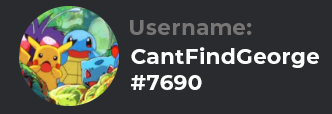
<style>
.page{position:relative;width:332px;height:114px;background:#292b2f}
.page>*{position:absolute;margin:0}
.t1{font:21.3px "Montserrat-Bold";letter-spacing:0.02em;color:#787575}
.t2{font:21.3px "Montserrat-Bold";letter-spacing:0.02em;color:#ffffff}
</style>
<div class="page">
<p class="t1" style="left:130px;top:20px;width:122px;height:15px">Username:</p>
<p class="t2" style="left:131px;top:47px;width:188px;height:43px">CantFindGeorge<br>#7690</p>
</div>
